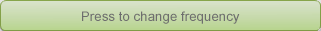
<style>
.page{position:relative;width:321px;height:31px}
.page>*{position:absolute;margin:0}
.t1{font:13.3px "ArialMT";color:#6e6e6e}
</style>
<div class="page">
<p class="t1" style="left:82px;top:11px;width:158px;height:13px">Press to change frequency</p>
</div>
